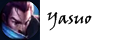
<style>
.page{position:relative;width:140px;height:40px;background:#ffffff}
.page>*{position:absolute;margin:0}
.t1{font:16px "VinerHandITC";color:#000000}
</style>
<div class="page">
<p class="t1" style="left:47px;top:12px;width:45px;height:19px">Yasuo</p>
</div>
